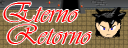
<style>
.page{position:relative;width:128px;height:48px}
.page>*{position:absolute;margin:0}
.t1{font:29.3px "Vivaldi";color:#ff0000}
</style>
<div class="page">
<p class="t1" style="left:3px;top:2px;width:76px;height:20px">Eterno</p>
<p class="t1" style="left:7px;top:24px;width:85px;height:20px">Retorno</p>
</div>
